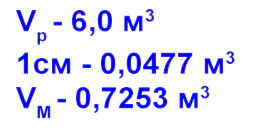
<style>
.page{position:relative;width:256px;height:128px;background:#ffffff}
.page>*{position:absolute;margin:0}
.t1{font:29.8px "Arial-BoldMT";color:#0000ff;scale:1.03 1}
</style>
<div class="page">
<p class="t1" style="left:15px;top:9px;width:139px;height:36px">Vp - 6,0 м3</p>
<p class="t1" style="left:18px;top:51px;width:217px;height:28px">1см - 0,0477 м3</p>
<p class="t1" style="left:15px;top:85px;width:195px;height:34px">VМ - 0,7253 м3</p>
</div>
